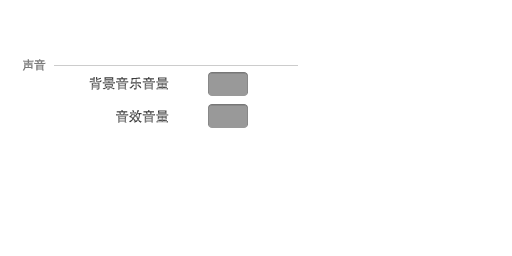
<style>
.page{position:relative;width:512px;height:256px;background:#ffffff}
.page>*{position:absolute;margin:0}
.t1{font:12px "DFPHeiW5-GB";color:#797979}
.t2{font:13.3px "DFPHeiW5-GB";color:#797979}
.t3{font:13.3px "DFPHeiW5-GB"}
</style>
<div class="page">
<p class="t1" style="left:22px;top:59px;width:24px;height:12px">声音</p>
<p class="t2" style="left:89px;top:77px;width:80px;height:13px">背景音乐音量</p>
<p class="t3" style="left:116px;top:110px;width:53px;height:13px">音效音量</p>
</div>
